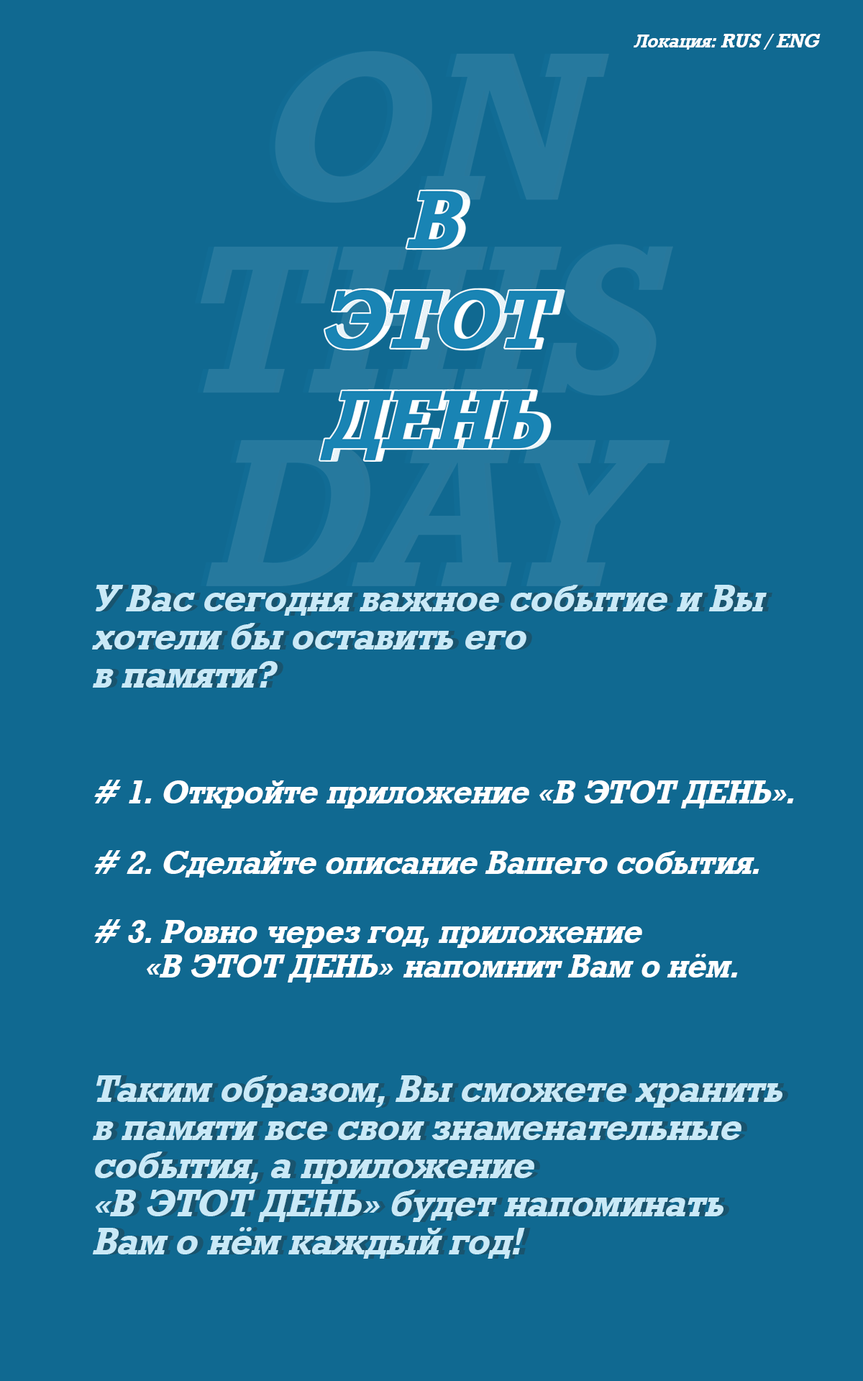
<style>
.page{position:relative;width:863px;height:1381px;background:#106991}
.page>*{position:absolute;margin:0}
.t1{font:19.7px "Rodeo-BoldItalic";color:#ffffff}
.t2{font:18.6px "Rodeo-BoldItalic";color:#ffffff}
.t3{font:38.1px/38.1px "Rodeo-BoldItalic";color:#c9e9f7}
.t4{font:38.1px/38.1px "Rodeo-BoldItalic"}
.t5{font:33.1px "Rodeo-BoldItalic";color:#ffffff}
.t6{font:33.1px/34.8px "Rodeo-BoldItalic";color:#ffffff}
.t7{font:33.1px/26.1px "Rodeo-BoldItalic";color:#ffffff}
</style>
<div class="page">
<p class="t1" style="left:634px;top:34px;width:187px;height:16px"><span class="t2">Локация:</span> RUS / ENG</p>
<p class="t3" style="left:92px;top:585px;width:675px;height:103px;text-align:right">У Вас сегодня важное событие и Вы <br>хотели бы оставить его<br>в памяти?</p>
<p class="t4" style="left:98px;top:585px;width:675px;height:103px;text-align:right">У Вас сегодня важное событие и Вы <br>хотели бы оставить его<br>в памяти?</p>
<p class="t5" style="left:94px;top:780px;width:700px;height:29px"># 1. Откройте приложение «В ЭТОТ ДЕНЬ».</p>
<p class="t5" style="left:94px;top:850px;width:666px;height:28px"># 2. Сделайте описание Вашего события.</p>
<p class="t6" style="left:94px;top:919px;width:644px;height:64px;text-align:right"><span class="t7"># 3.</span> Ровно через год, приложение <br>  «В ЭТОТ ДЕНЬ»  напомнит Вам о нём.</p>
<p class="t3" style="left:92px;top:1076px;width:691px;height:183px;text-align:right">Таким образом, Вы сможете хранить <br>в памяти все свои знаменательные <br>события, а приложение <br>«В ЭТОТ ДЕНЬ» будет напоминать <br>Вам о нём каждый год!</p>
<p class="t4" style="left:98px;top:1076px;width:690px;height:183px;text-align:right">Таким образом, Вы сможете хранить<br>в памяти все свои знаменательные <br>события, а приложение <br>«В ЭТОТ ДЕНЬ» будет напоминать <br>Вам о нём каждый год!</p>
</div>
